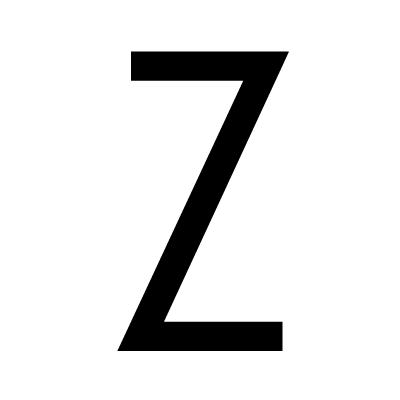
<style>
.page{position:relative;width:400px;height:400px;background:#ffffff}
.page>*{position:absolute;margin:0}
.t1{font:416.7px "CenturyGothic";color:#000000}
</style>
<div class="page">
<p class="t1" style="left:117px;top:51px;width:172px;height:300px">Z</p>
</div>
